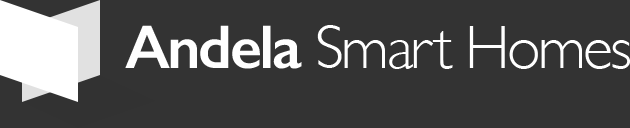
<style>
.page{position:relative;width:630px;height:128px;background:#333333}
.page>*{position:absolute;margin:0}
.t1{font:62px "GillSans-Light";letter-spacing:-0.04em;color:#ffffff}
.t2{font:62px "GillSans-SemiBold";letter-spacing:-0.04em;color:#ffffff}
</style>
<div class="page">
<p class="t1" style="left:125px;top:25px;width:505px;height:44px"><span class="t2">Andela </span>Smart Homes</p>
</div>
